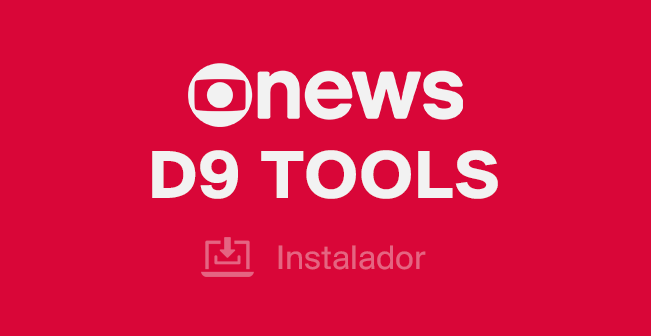
<style>
.page{position:relative;width:651px;height:336px;background:#d90638}
.page>*{position:absolute;margin:0}
.t1{font:70.8px "SuisseBPIntl-Bold";letter-spacing:0.04em;color:#ffffff}
.t2{font:35.4px "SuisseBPIntl-Regular";letter-spacing:0.01em;color:#e56482}
</style>
<div class="page">
<p class="t1" style="left:152px;top:150px;width:346px;height:49px">D9 TOOLS</p>
<p class="t2" style="left:278px;top:245px;width:148px;height:25px">Instalador</p>
</div>
